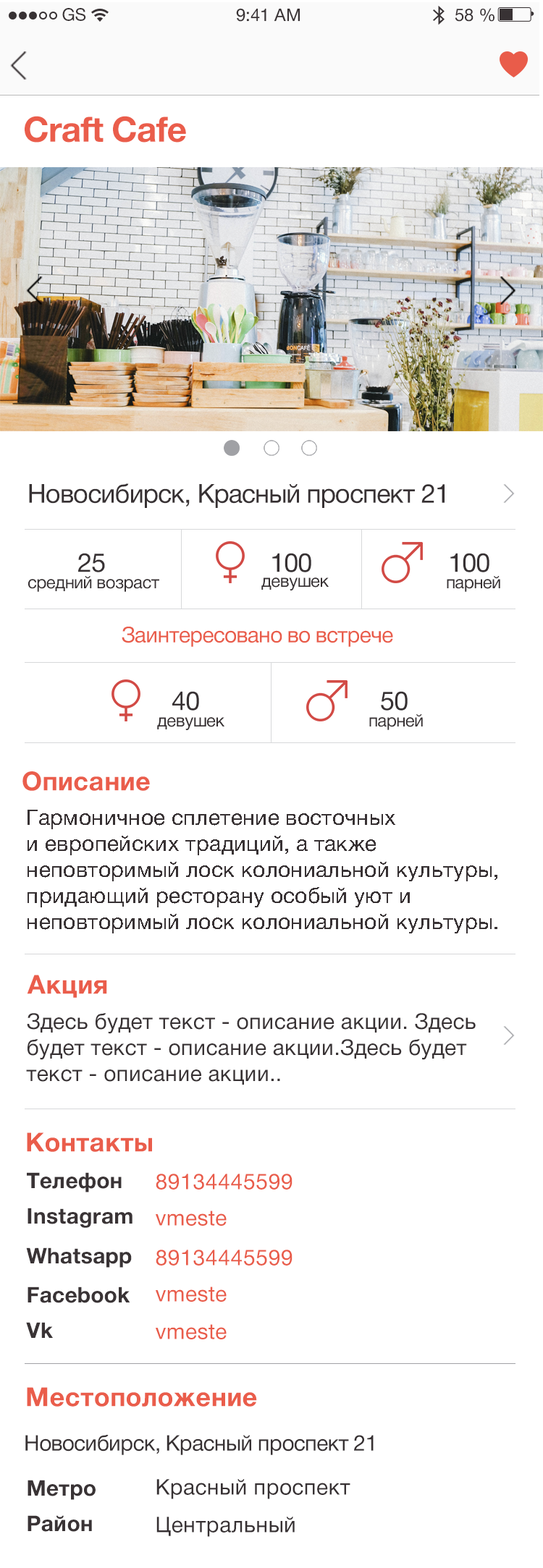
<style>
.page{position:relative;width:543px;height:1568px;background:#ffffff}
.page>*{position:absolute;margin:0}
.t1{font:17.4px "HelveticaNeueCyr-Roman";color:#383234}
.t2{font:34.7px "HelveticaNeueCyr-Bold";letter-spacing:-0.024em;color:#ea5d4b}
.t3{font:26px "HelveticaNeueCyr-Roman";letter-spacing:-0.024em;color:#373133}
.t4{font:17.4px "HelveticaNeueCyr-Roman";letter-spacing:-0.024em;color:#373133}
.t5{font:21.7px "HelveticaNeueCyr-Roman";letter-spacing:-0.024em;color:#e95c4a}
.t6{font:26px "HelveticaNeueCyr-Bold";letter-spacing:0.012em;color:#ea5d4b}
.t7{font:21.7px/26px "HelveticaNeueCyr-Roman";letter-spacing:0.012em;color:#383234}
.t8{font:21.7px "HelveticaNeueCyr-Bold";letter-spacing:0.012em;color:#393335}
.t9{font:21.7px "HelveticaNeueCyr-Roman";letter-spacing:0.012em;color:#e95c4a}
.t10{font:21.7px "HelveticaNeueCyr-Roman";letter-spacing:-0.024em;color:#373133}
.t11{font:21.7px "HelveticaNeueCyr-Roman";letter-spacing:0.012em;color:#373133}
</style>
<div class="page">
<p class="t1" style="left:62px;top:8px;width:24px;height:13px">GS</p>
<p class="t1" style="left:236px;top:8px;width:64px;height:14px">9:41 AM</p>
<p class="t1" style="left:454px;top:8px;width:40px;height:14px">58 %</p>
<p class="t2" style="left:25px;top:116px;width:161px;height:27px">Craft Cafe</p>
<p class="t3" style="left:29px;top:483px;width:415px;height:25px">Новосибирск, Красный проспект 21</p>
<p class="t3" style="left:78px;top:553px;width:27px;height:19px">25</p>
<p class="t3" style="left:272px;top:553px;width:39px;height:19px">100</p>
<p class="t3" style="left:450px;top:553px;width:39px;height:19px">100</p>
<p class="t4" style="left:28px;top:576px;width:131px;height:16px">средний возраст</p>
<p class="t4" style="left:261px;top:577px;width:68px;height:13px">девушек</p>
<p class="t4" style="left:446px;top:576px;width:54px;height:16px">парней</p>
<p class="t5" style="left:122px;top:627px;width:271px;height:20px">Заинтересовано во встрече</p>
<p class="t3" style="left:172px;top:691px;width:27px;height:20px">40</p>
<p class="t3" style="left:381px;top:691px;width:26px;height:20px">50</p>
<p class="t4" style="left:157px;top:717px;width:67px;height:13px">девушек</p>
<p class="t4" style="left:369px;top:714px;width:54px;height:16px">парней</p>
<p class="t6" style="left:22px;top:771px;width:128px;height:20px">Описание</p>
<p class="t7" style="left:27px;top:810px;width:470px;height:123px">Гармоничное сплетение восточных и европейских традиций, а также неповторимый лоск колониальной культуры, придающий ресторану особый уют и неповторимый лоск колониальной культуры.</p>
<p class="t6" style="left:27px;top:975px;width:80px;height:23px">Акция</p>
<p class="t7" style="left:26px;top:1013px;width:449px;height:72px">Здесь будет текст - описание акции. Здесь будет текст - описание акции.Здесь будет текст - описание акции..</p>
<p class="t6" style="left:27px;top:1132px;width:125px;height:20px">Контакты</p>
<p class="t8" style="left:27px;top:1172px;width:95px;height:20px">Телефон</p>
<p class="t9" style="left:156px;top:1174px;width:136px;height:16px">89134445599</p>
<p class="t8" style="left:27px;top:1208px;width:105px;height:20px">Instagram</p>
<p class="t9" style="left:156px;top:1211px;width:70px;height:15px">vmeste</p>
<p class="t8" style="left:26px;top:1247px;width:106px;height:21px">Whatsapp</p>
<p class="t9" style="left:156px;top:1250px;width:136px;height:16px">89134445599</p>
<p class="t8" style="left:27px;top:1287px;width:103px;height:16px">Facebook</p>
<p class="t9" style="left:156px;top:1287px;width:70px;height:15px">vmeste</p>
<p class="t8" style="left:26px;top:1322px;width:27px;height:16px">Vk</p>
<p class="t9" style="left:156px;top:1324px;width:70px;height:15px">vmeste</p>
<p class="t6" style="left:27px;top:1387px;width:230px;height:20px">Местоположение</p>
<p class="t10" style="left:25px;top:1435px;width:348px;height:20px">Новосибирск, Красный проспект 21</p>
<p class="t8" style="left:27px;top:1480px;width:69px;height:20px">Метро</p>
<p class="t11" style="left:156px;top:1479px;width:194px;height:20px">Красный проспект</p>
<p class="t8" style="left:27px;top:1515px;width:65px;height:17px">Район</p>
<p class="t11" style="left:156px;top:1517px;width:138px;height:20px">Центральный</p>
</div>
